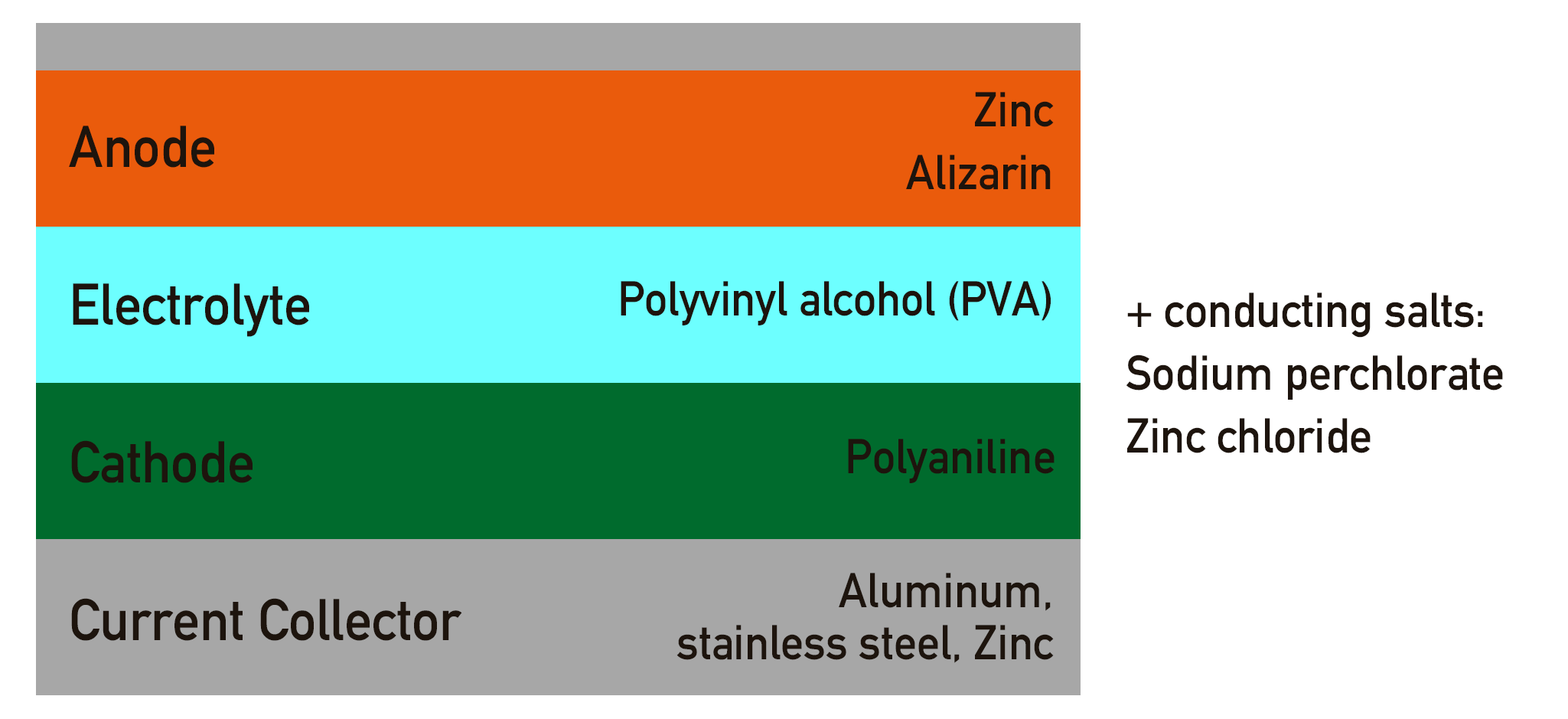
<style>
.page{position:relative;width:1568px;height:719px;background:#ffffff}
.page>*{position:absolute;margin:0}
.t1{font:48.2px/62.8px "DIN-1451-Mittelschrift-Regular";color:#1d140d;scale:0.95 1}
.t2{font:57.9px/157.6px "DIN-1451-Mittelschrift-Regular";color:#1d140d;scale:0.95 1}
.t3{font:48.2px "DIN-1451-Mittelschrift-Regular";color:#1d140d;scale:0.95 1}
.t4{font:48.2px/52px "DIN-1451-Mittelschrift-Regular";color:#1d140d;scale:0.95 1}
</style>
<div class="page">
<p class="t1" style="left:906px;top:92px;width:148px;height:98px;text-align:right">Zinc<br>Alizarin</p>
<p class="t2" style="left:69px;top:126px;width:393px;height:515px;text-align:justify">Anode<br>Electrolyte<br>Cathode<br>Current Collector</p>
<p class="t3" style="left:621px;top:281px;width:430px;height:44px">Polyvinyl alcohol (PVA)</p>
<p class="t1" style="left:1126px;top:292px;width:377px;height:161px">+ conducting salts:<br>Sodium perchlorate<br>Zinc chloride</p>
<p class="t3" style="left:848px;top:438px;width:207px;height:45px">Polyaniline</p>
<p class="t4" style="left:676px;top:572px;width:378px;height:91px;text-align:right">Aluminum,<br>stainless steel, Zinc</p>
</div>
